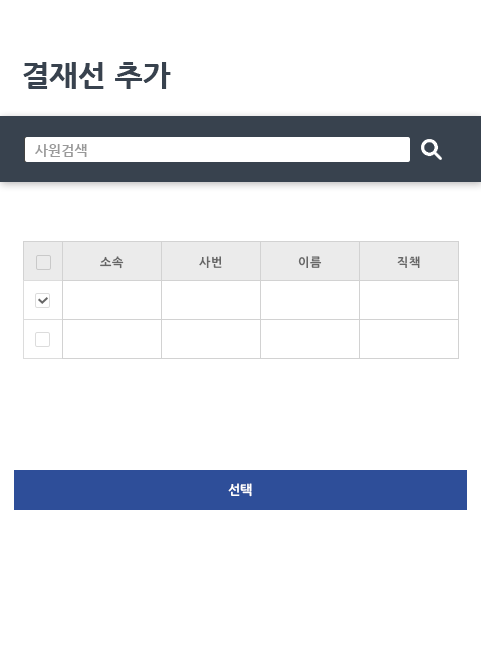
<style>
.page{position:relative;width:481px;height:652px;background:#ffffff}
.page>*{position:absolute;margin:0}
.t1{font:30px "NanumGothicExtraBold";color:#38424e}
.t2{font:14px "NanumGothicBold";color:#999999}
.t3{font:12px "NanumGothicOTFBold";color:#666666}
.t4{font:13px "NanumGothicOTFBold";letter-spacing:-0.025em;color:#ffffff}
</style>
<div class="page">
<p class="t1" style="left:23px;top:62px;width:148px;height:27px">결재선 추가</p>
<p class="t2" style="left:35px;top:144px;width:52px;height:13px">사원검색</p>
<p class="t3" style="left:100px;top:256px;width:24px;height:13px">소속</p>
<p class="t3" style="left:199px;top:256px;width:23px;height:12px">사번</p>
<p class="t3" style="left:298px;top:256px;width:24px;height:12px">이름</p>
<p class="t3" style="left:397px;top:256px;width:23px;height:12px">직책</p>
<p class="t4" style="left:228px;top:483px;width:24px;height:14px">선택</p>
</div>
